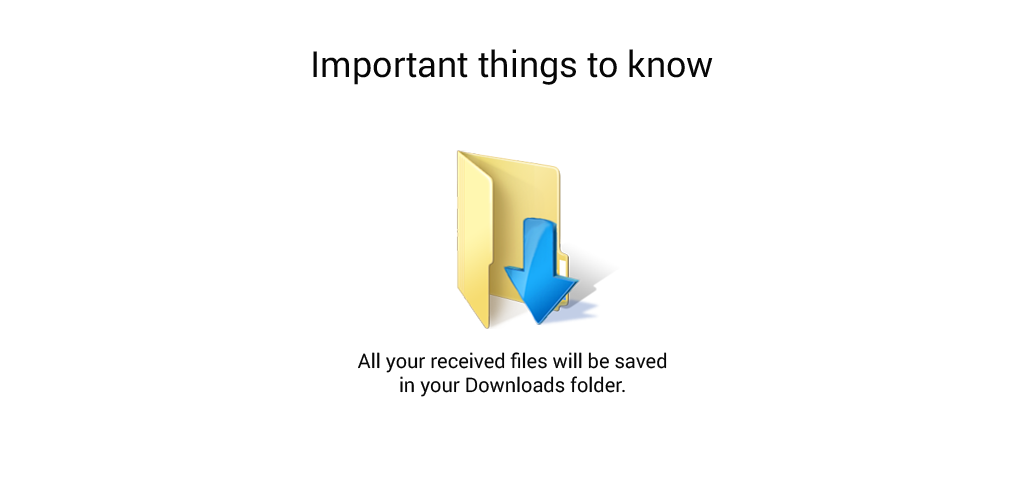
<style>
.page{position:relative;width:1024px;height:500px;background:#ffffff}
.page>*{position:absolute;margin:0}
.t1{font:36px "Roboto-Regular";color:#060606}
.t2{font:20px "Roboto-Regular";color:#060606}
</style>
<div class="page">
<p class="t1" style="left:313px;top:49px;width:400px;height:36px">Important things to know</p>
<p class="t2" style="left:358px;top:352px;width:309px;height:45px;text-align:center">All your received files will be saved<br>in your Downloads folder.</p>
</div>
